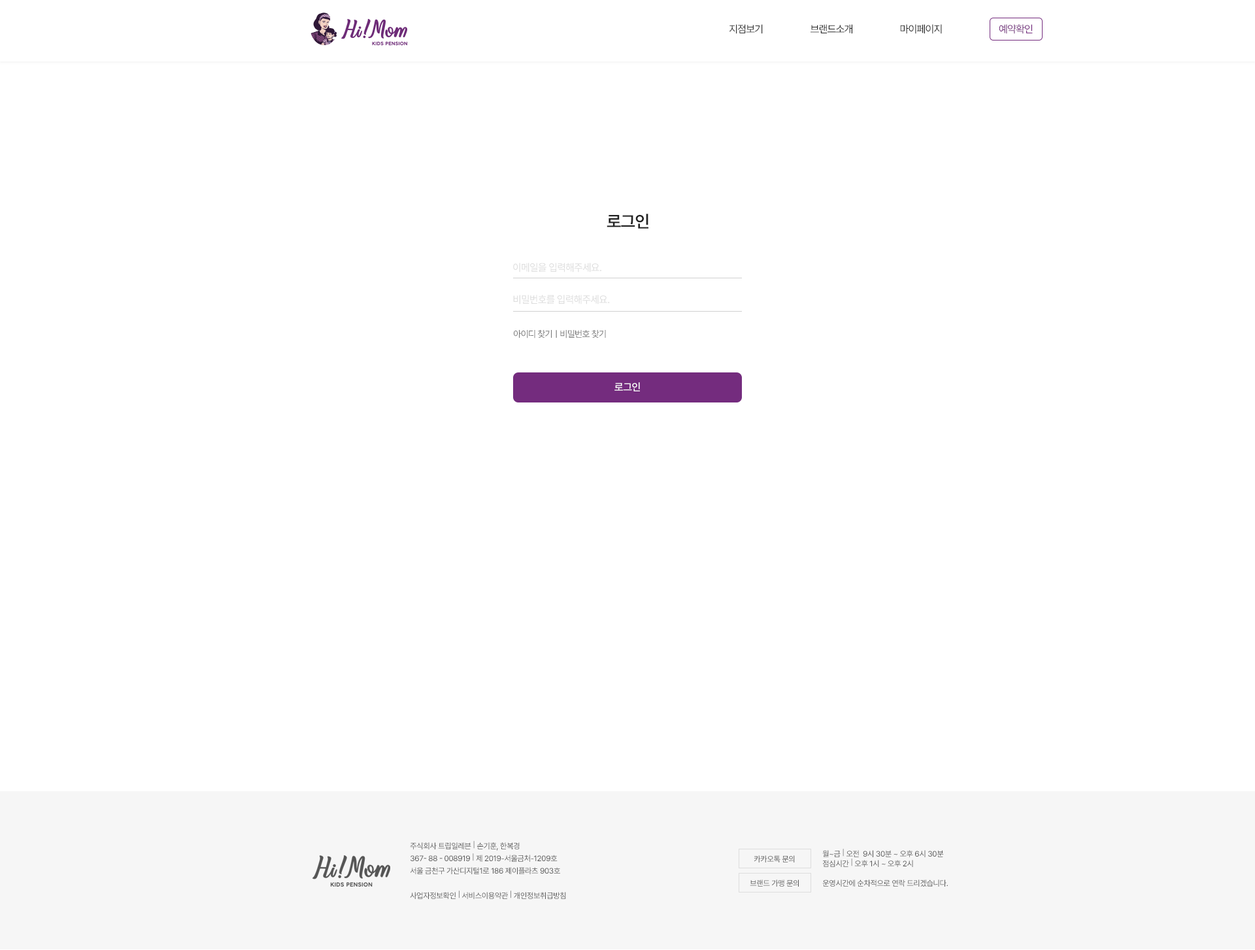
<style>
.page{position:relative;width:1255px;height:950px;background:#ffffff}
.page>*{position:absolute;margin:0}
.t1{font:10.5px "Pretendard-Regular";letter-spacing:-0.05em;color:#333333}
.t2{font:10.5px "Pretendard-Regular";letter-spacing:-0.05em;color:#222222}
.t3{font:10.5px "Pretendard-Regular";letter-spacing:-0.05em;color:#742c7e}
.t4{font:17px "Pretendard-SemiBold";letter-spacing:-0.025em;color:#222222;text-transform:uppercase}
.t5{font:10.5px "Pretendard-Regular";letter-spacing:-0.025em;color:#dddddd;text-transform:uppercase;scale:0.96 1}
.t6{font:9.1px "Pretendard-Regular";letter-spacing:-0.05em;color:#717171;text-transform:uppercase}
.t7{font:10.5px "Pretendard-Medium";letter-spacing:-0.025em;color:#ffffff;text-transform:uppercase}
.t8{font:7.8px/12.4px "Pretendard-Regular";letter-spacing:-0.025em;color:#555555}
.t9{font:7.8px "Pretendard-Regular";letter-spacing:-0.025em;color:#555555}
.t10{font:7.8px/9.8px "Pretendard-Regular";letter-spacing:-0.025em;color:#555555}
</style>
<div class="page">
<p class="t1" style="left:729px;top:24px;width:34px;height:10px">지점보기</p>
<p class="t2" style="left:810px;top:24px;width:42px;height:10px">브랜드소개</p>
<p class="t2" style="left:900px;top:24px;width:42px;height:10px">마이페이지</p>
<p class="t3" style="left:999px;top:24px;width:34px;height:10px">예약확인</p>
<p class="t4" style="left:607px;top:214px;width:41px;height:15px">로그인</p>
<p class="t5" style="left:513px;top:263px;width:88px;height:10px">이메일을 입력해주세요.</p>
<p class="t5" style="left:513px;top:295px;width:97px;height:10px">비밀번호를 입력해주세요.</p>
<p class="t6" style="left:514px;top:330px;width:92px;height:9px">아이디 찾기ㅣ비밀번호 찾기</p>
<p class="t7" style="left:614px;top:382px;width:26px;height:9px">로그인</p>
<p class="t8" style="left:410px;top:841px;width:156px;height:58px">주식회사 트립일레븐 | 손기훈, 한복경<br>367- 88 - 008919 | 제 2019-서울금처-1209호<br>서울 금천구 가산디지털1로 186 제이플라츠 903호<br><br>사업자정보확인 | 서비스이용약관 | 개인정보취급방침</p>
<p class="t9" style="left:754px;top:856px;width:41px;height:7px">카카오톡 문의</p>
<p class="t10" style="left:822px;top:849px;width:122px;height:18px">월~금 | 오전  9시 30분 ~ 오후 6시 30분<br>점심시간 | 오후 1시 ~ 오후 2시</p>
<p class="t9" style="left:750px;top:880px;width:49px;height:7px">브랜드 가맹 문의</p>
<p class="t9" style="left:822px;top:880px;width:126px;height:7px">운영시간에 순차적으로 연락 드리겠습니다.</p>
</div>
